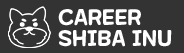
<style>
.page{position:relative;width:184px;height:53px;background:#333333}
.page>*{position:absolute;margin:0}
.t1{font:21.5px/20.5px "MaplestoryBold";letter-spacing:0.02em;color:#ffffff}
</style>
<div class="page">
<p class="t1" style="left:58px;top:9px;width:114px;height:38px">CAREER<br>SHIBA INU</p>
</div>
